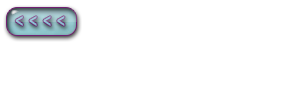
<style>
.page{position:relative;width:300px;height:100px;background:#ffffff}
.page>*{position:absolute;margin:0}
.t1{font:20px "LHFUncialCaps";color:#99c7d7;font-variant:small-caps}
</style>
<div class="page">
<p class="t1" style="left:15px;top:16px;width:50px;height:10px">&lt; &lt; &lt; &lt;</p>
</div>
